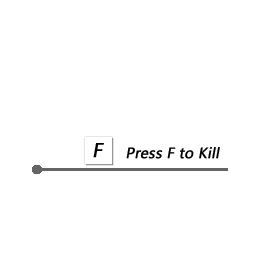
<style>
.page{position:relative;width:256px;height:256px;background:#ffffff}
.page>*{position:absolute;margin:0}
.t1{font:20px "NirmalaUI";color:#000000;font-weight:bold;font-style:italic}
.t2{font:15px "NirmalaUI";color:#000000;font-weight:bold;font-style:italic}
</style>
<div class="page">
<p class="t1" style="left:93px;top:143px;width:11px;height:15px">F</p>
<p class="t2" style="left:126px;top:147px;width:94px;height:12px">Press F to Kill</p>
</div>
